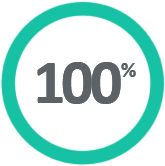
<style>
.page{position:relative;width:165px;height:166px;background:#ffffff}
.page>*{position:absolute;margin:0}
.t1{font:64px "Calibri-Bold";letter-spacing:-0.06em;color:#5c6265}
.t2{font:64px "Calibri-Bold";letter-spacing:-0.125em;color:#5c6265}
.t3{font:21px "Calibri-Bold";letter-spacing:-0.125em;color:#5c6265}
</style>
<div class="page">
<p class="t1" style="left:37px;top:62px;width:99px;height:42px">10<span class="t2">0 </span><span class="t3">%</span></p>
<p class="t1" style="left:37px;top:62px;width:99px;height:42px">10<span class="t2">0 </span><span class="t3">%</span></p>
</div>
